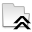
<style>
.page{position:relative;width:32px;height:32px;background:#ffffff}
.page>*{position:absolute;margin:0}
.t1{font:15.5px "MyriadPro-Bold";color:#000000;scale:2.23 1}
</style>
<div class="page">
<p class="t1" style="left:13px;top:16px;width:18px;height:8px">^</p>
<p class="t1" style="left:13px;top:22px;width:18px;height:8px">^</p>
</div>
